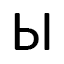
<style>
.page{position:relative;width:64px;height:64px;background:#ffffff}
.page>*{position:absolute;margin:0}
.t1{font:58.3px "Calibri";color:#000000}
</style>
<div class="page">
<p class="t1" style="left:14px;top:13px;width:36px;height:37px">Ы</p>
</div>
